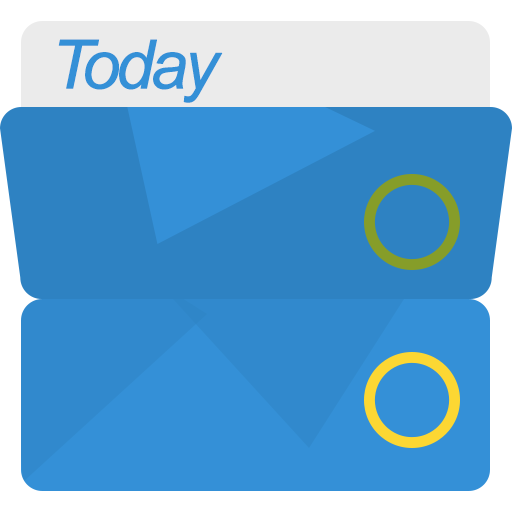
<style>
.page{position:relative;width:512px;height:512px;background:#3490d7}
.page>*{position:absolute;margin:0}
.t1{font:67.5px "Arial-ItalicMT";letter-spacing:-0.08em;color:#3490d7;font-weight:bold}
</style>
<div class="page">
<p class="t1" style="left:58px;top:39px;width:165px;height:64px">Today</p>
</div>
